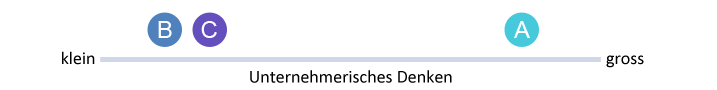
<style>
.page{position:relative;width:717px;height:90px;background:#ffffff}
.page>*{position:absolute;margin:0}
.t1{font:24px "ArialMT";color:#ffffff}
.t2{font:18px "Calibri";color:#000000}
</style>
<div class="page">
<p class="t1" style="left:158px;top:21px;width:14px;height:17px">B</p>
<p class="t1" style="left:201px;top:21px;width:16px;height:17px">C</p>
<p class="t1" style="left:514px;top:21px;width:16px;height:17px">A</p>
<p class="t2" style="left:62px;top:51px;width:33px;height:14px">klein</p>
<p class="t2" style="left:606px;top:55px;width:38px;height:13px">gross</p>
<p class="t2" style="left:250px;top:70px;width:202px;height:13px">Unternehmerisches Denken</p>
</div>
